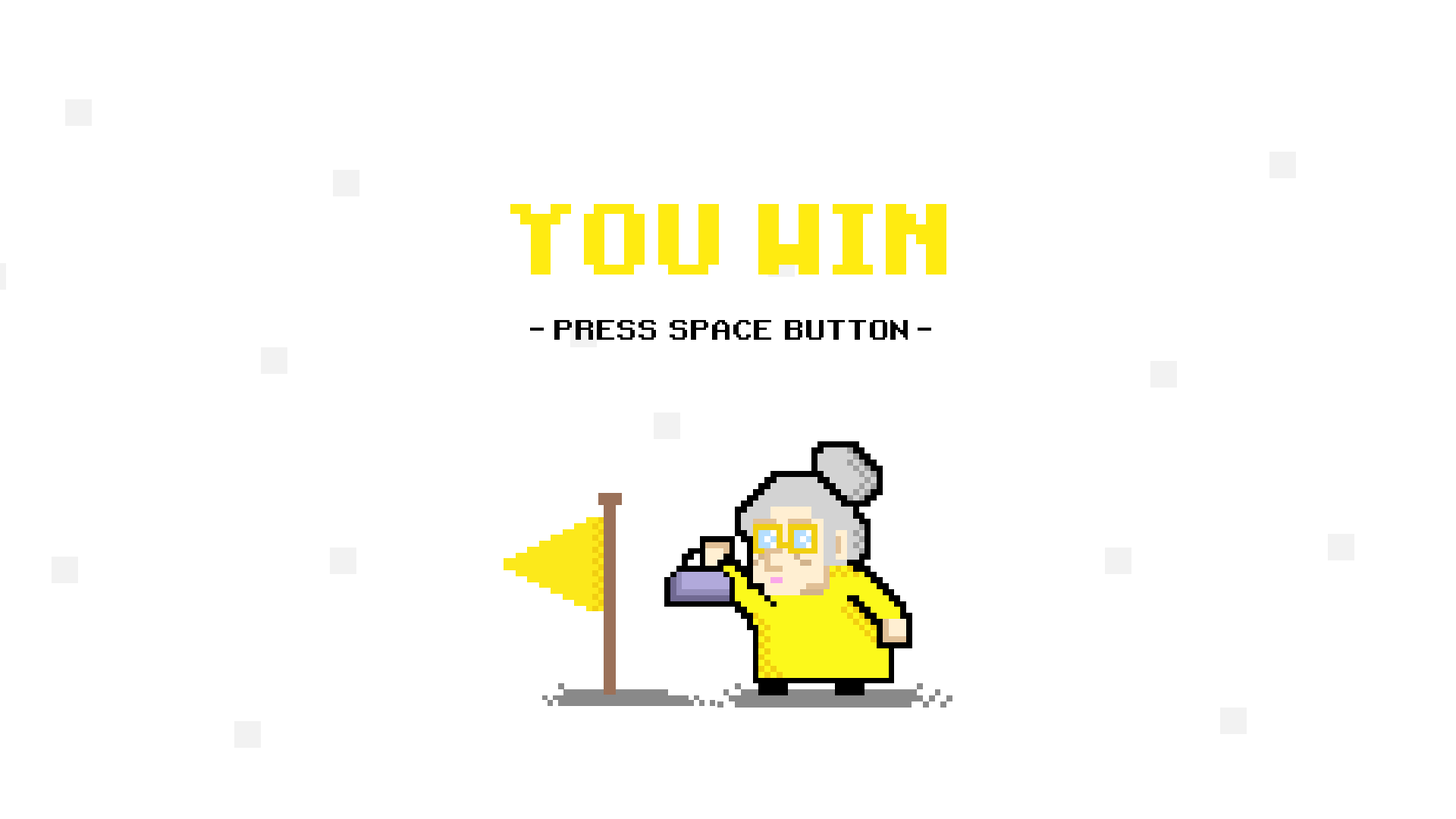
<style>
.page{position:relative;width:1456px;height:819px;background:#ffffff}
.page>*{position:absolute;margin:0}
.t1{font:80.5px "Mojang-Bold";letter-spacing:0.01em;color:#ffeb11}
.t2{font:27.3px "RetroGaming";color:#000000}
</style>
<div class="page">
<p class="t1" style="left:510px;top:204px;width:436px;height:71px">YOU  WIN</p>
<p class="t2" style="left:554px;top:320px;width:354px;height:20px">PRESS SPACE BUTTON</p>
</div>
